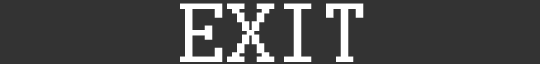
<style>
.page{position:relative;width:540px;height:64px;background:#333333}
.page>*{position:absolute;margin:0}
.t1{font:79.4px "JF-Dot-AyuMin-18";color:#ffffff;font-weight:bold;scale:1.12 1}
</style>
<div class="page">
<p class="t1" style="left:180px;top:3px;width:184px;height:59px">EXIT</p>
</div>
